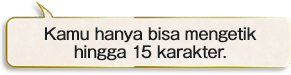
<style>
.page{position:relative;width:291px;height:75px;background:#ffffff}
.page>*{position:absolute;margin:0}
.t1{font:16px/18px "GothicMB101Pro-Regular";letter-spacing:-0.04em;color:#1e2121;font-weight:bold}
</style>
<div class="page">
<p class="t1" style="left:45px;top:27px;width:212px;height:34px;text-align:center">Kamu hanya bisa mengetik<br>hingga 15 karakter.</p>
</div>
